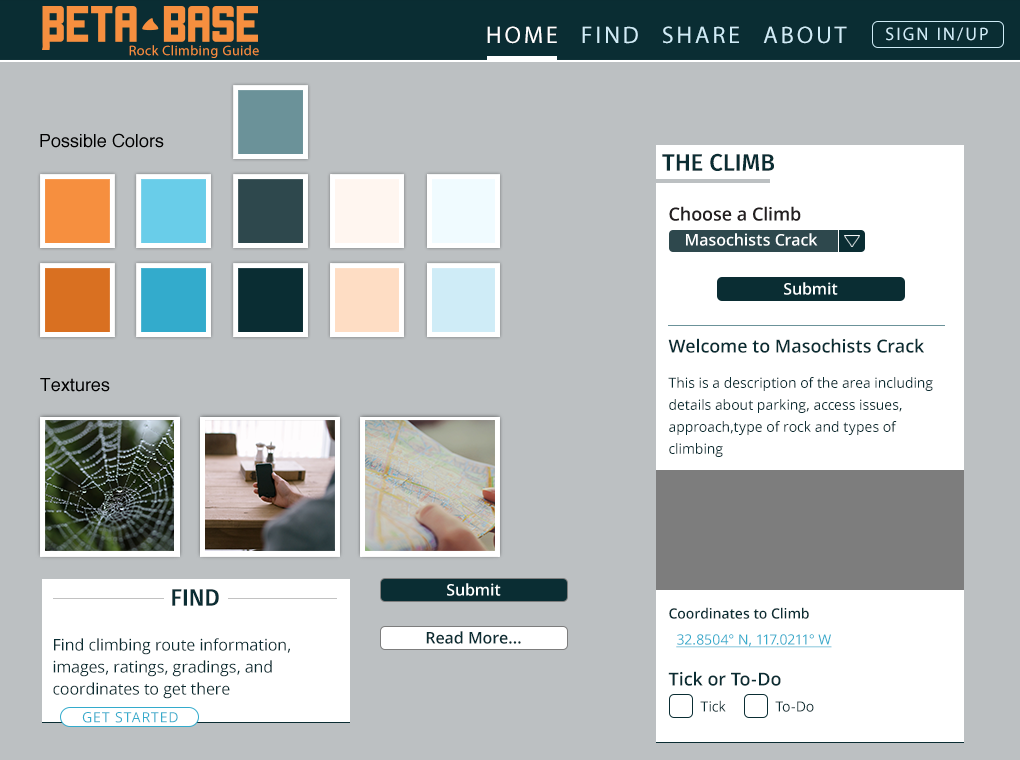
<style>
.page{position:relative;width:1020px;height:760px;background:#bcc0c2}
.page>*{position:absolute;margin:0}
.t1{font:24px "MyriadPro-Regular";letter-spacing:0.12em;color:#feffff;text-transform:uppercase}
.t2{font:24px "MyriadPro-Regular";letter-spacing:0.12em;color:#cfecf7;text-transform:uppercase}
.t3{font:18px "MyriadPro-Regular";letter-spacing:0.12em;color:#cfecf7;text-transform:uppercase}
.t4{font:14px "MyriadPro-Regular";letter-spacing:0.04em;color:#f58f3f}
.t5{font:18px "Helvetica";color:#000000}
.t6{font:24px "FiraSans-Medium";color:#0a2d33}
.t7{font:18px "OpenSans-Semibold";color:#231f20}
.t8{font:16px "OpenSans-Semibold";color:#ffffff}
.t9{font:18px "OpenSans-Semibold";color:#0a2d33}
.t10{font:14px/22px "OpenSans";color:#0a2d33}
.t11{font:14px "OpenSans-Semibold";color:#0a2d33}
.t12{font:16px/22px "OpenSans";color:#0a2d33}
.t13{font:16px "OpenSans-Semibold";color:#0a2d33}
.t14{font:14px "OpenSans";color:#33abcc;text-decoration:underline}
.t15{font:14px "OpenSans";color:#0a2d33}
.t16{font:14px "OpenSans";letter-spacing:0.06em;color:#33abcc}
</style>
<div class="page">
<p class="t1" style="left:487px;top:26px;width:70px;height:18px">HOME</p>
<p class="t2" style="left:582px;top:26px;width:56px;height:18px">FIND</p>
<p class="t2" style="left:663px;top:26px;width:76px;height:18px">SHARE</p>
<p class="t2" style="left:763px;top:26px;width:84px;height:18px">ABOUT</p>
<p class="t3" style="left:886px;top:27px;width:102px;height:14px">Sign in/Up</p>
<p class="t4" style="left:129px;top:45px;width:130px;height:13px">Rock Climbing Guide</p>
<p class="t5" style="left:40px;top:133px;width:124px;height:15px">Possible Colors</p>
<p class="t6" style="left:662px;top:153px;width:112px;height:18px">THE CLIMB</p>
<p class="t7" style="left:669px;top:206px;width:132px;height:15px">Choose a Climb</p>
<p class="t8" style="left:686px;top:233px;width:132px;height:13px">Masochists Crack</p>
<p class="t8" style="left:784px;top:282px;width:54px;height:13px">Submit</p>
<p class="t9" style="left:668px;top:338px;width:256px;height:15px">Welcome to Masochists Crack</p>
<p class="t10" style="left:668px;top:377px;width:265px;height:80px">This is a description of the area including <br>details about parking, access issues, <br>approach,type of rock and types of <br>climbing</p>
<p class="t5" style="left:40px;top:378px;width:70px;height:14px">Textures</p>
<p class="t6" style="left:172px;top:589px;width:47px;height:17px">FIND</p>
<p class="t8" style="left:447px;top:583px;width:54px;height:13px">Submit</p>
<p class="t11" style="left:669px;top:607px;width:140px;height:12px">Coordinates to Climb</p>
<p class="t12" style="left:53px;top:638px;width:237px;height:61px">Find climbing route information,<br>images, ratings, gradings, and<br>coordinates to get there</p>
<p class="t13" style="left:426px;top:631px;width:95px;height:13px">Read More...</p>
<p class="t14" style="left:676px;top:634px;width:156px;height:14px">32.8504° N, 117.0211° W</p>
<p class="t9" style="left:668px;top:671px;width:113px;height:15px">Tick or To-Do</p>
<p class="t15" style="left:700px;top:700px;width:26px;height:12px">Tick</p>
<p class="t15" style="left:775px;top:701px;width:39px;height:11px">To-Do</p>
<p class="t16" style="left:82px;top:712px;width:96px;height:11px">GET STARTED</p>
</div>
